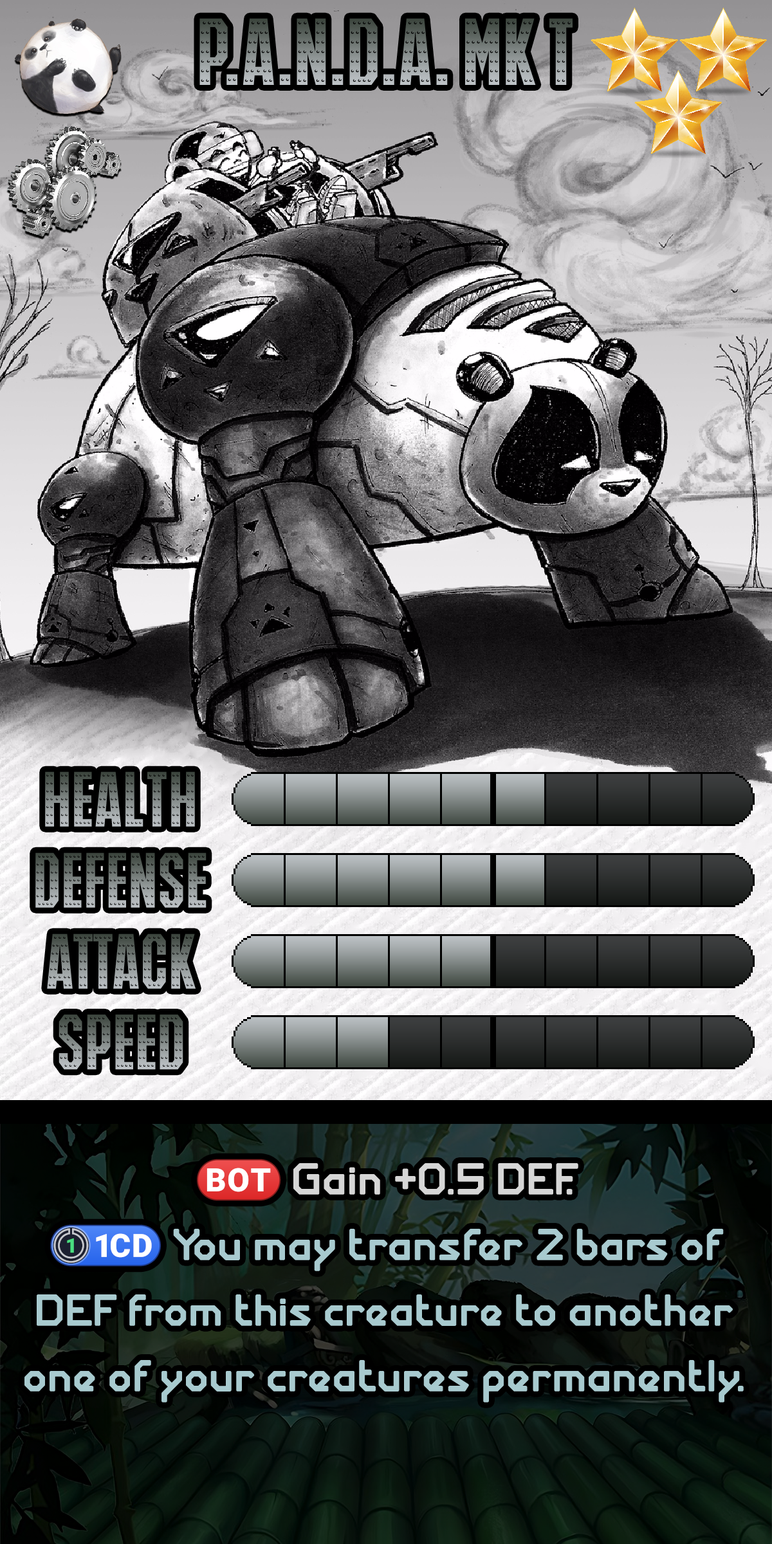
<style>
.page{position:relative;width:772px;height:1544px}
.page>*{position:absolute;margin:0}
.t1{font:156.4px "IRONMANOFWAR001BNCV"}
.t2{font:128.7px "IRONMANOFWAR001BNCV"}
.t3{font:72.7px/65.6px "GiantRobotArmy-Medium";color:#a8cacf}
.t4{font:72.7px/65.6px "stoogedings-Regular";color:#d6d6d6}
.t5{font:72.7px/65.6px "GiantRobotArmy-Medium";color:#d6d6d6}
.t6{font:72.7px/65.6px "stoogedings-Regular";color:#a8cacf}
</style>
<div class="page">
<p class="t1" style="left:199px;top:18px;width:374px;height:67px">P.A.N.D.A. Mk T</p>
<p class="t2" style="left:45px;top:772px;width:150px;height:55px">Health</p>
<p class="t2" style="left:35px;top:853px;width:172px;height:55px">Defense</p>
<p class="t2" style="left:47px;top:934px;width:149px;height:55px">Attack</p>
<p class="t2" style="left:59px;top:1015px;width:124px;height:55px">Speed</p>
<p class="t3" style="left:24px;top:1159px;width:720px;height:244px;text-align:center"><span class="t4">(BOT)</span><span class="t5"> Gain +0.5 DEF.<br></span><span class="t6">(1CD)</span> You may transfer 2 bars of DEF from this creature to another one of your creatures permanently.</p>
</div>
